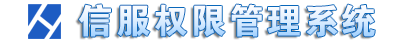
<style>
.page{position:relative;width:412px;height:43px;background:#ffffff}
.page>*{position:absolute;margin:0}
.t1{font:35px "FZDHTJW--GB1-0";letter-spacing:0.075em}
</style>
<div class="page">
<p class="t1" style="left:79px;top:4px;width:296px;height:33px">信服权限管理系统</p>
</div>
